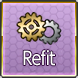
<style>
.page{position:relative;width:78px;height:78px}
.page>*{position:absolute;margin:0}
.t1{font:18px "UDShinGoPro-Regular";letter-spacing:-0.04em;color:#ffffff;scale:0.9 1}
</style>
<div class="page">
<p class="t1" style="left:23px;top:50px;width:32px;height:16px">Refit</p>
</div>
